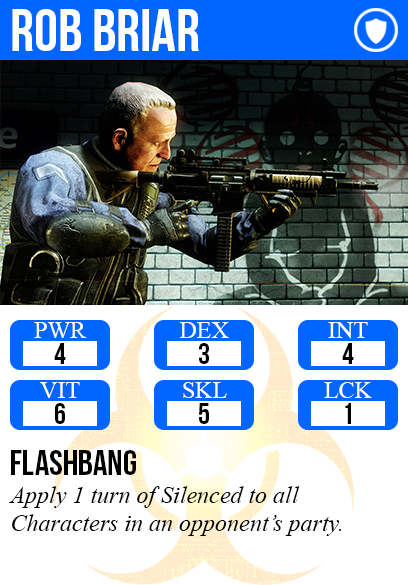
<style>
.page{position:relative;width:408px;height:585px;background:#ffffff}
.page>*{position:absolute;margin:0}
.t1{font:60px "BebasNeue";color:#ffffff}
.t2{font:24px "TimesNewRomanPSMT";color:#ffffff}
.t3{font:30px "BebasNeue";color:#000000}
.t4{font:36px "BebasNeue";color:#000000}
.t5{font:24px "TimesNewRomanPS-ItalicMT";color:#000000}
</style>
<div class="page">
<p class="t1" style="left:12px;top:9px;width:187px;height:42px">rob briar</p>
<p class="t2" style="left:34px;top:322px;width:53px;height:16px">PWR</p>
<p class="t2" style="left:179px;top:322px;width:50px;height:16px">DEX</p>
<p class="t2" style="left:328px;top:322px;width:40px;height:17px">INT</p>
<p class="t3" style="left:54px;top:343px;width:12px;height:21px">4</p>
<p class="t3" style="left:199px;top:343px;width:10px;height:21px">3</p>
<p class="t3" style="left:342px;top:343px;width:12px;height:21px">4</p>
<p class="t2" style="left:40px;top:382px;width:40px;height:16px">VIT</p>
<p class="t2" style="left:183px;top:382px;width:44px;height:16px">SKL</p>
<p class="t2" style="left:324px;top:382px;width:48px;height:16px">LCK</p>
<p class="t3" style="left:55px;top:403px;width:10px;height:21px">6</p>
<p class="t3" style="left:199px;top:403px;width:10px;height:21px">5</p>
<p class="t3" style="left:345px;top:403px;width:6px;height:21px">1</p>
<p class="t4" style="left:11px;top:450px;width:125px;height:25px">flashbang</p>
<p class="t5" style="left:9px;top:486px;width:333px;height:50px">Apply 1 turn of Silenced to all<br>Characters in an opponent’s party.</p>
</div>
